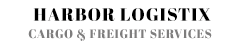
<style>
.page{position:relative;width:238px;height:44px;background:#ffffff}
.page>*{position:absolute;margin:0}
.t1{font:18px "AbrilFatface-Regular";letter-spacing:0.05em;color:#000000;text-transform:uppercase}
.t2{font:12px "AbrilFatface-Regular";letter-spacing:0.05em;color:#7e7d7d;text-transform:uppercase}
</style>
<div class="page">
<p class="t1" style="left:33px;top:8px;width:178px;height:13px">HARBOR LOGISTIX</p>
<p class="t2" style="left:28px;top:29px;width:184px;height:12px">Cargo &amp; freight services</p>
</div>
